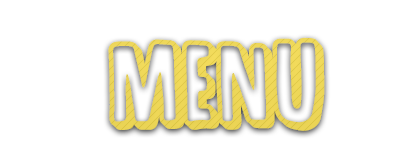
<style>
.page{position:relative;width:417px;height:166px;background:#ffffff}
.page>*{position:absolute;margin:0}
.t1{font:84.9px "SugarpunchDEMO";color:#ecd557}
</style>
<div class="page">
<p class="t1" style="left:108px;top:37px;width:217px;height:94px">MENU</p>
</div>
